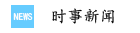
<style>
.page{position:relative;width:140px;height:33px;background:#ffffff}
.page>*{position:absolute;margin:0}
.t1{font:9.8px "KaiTi";color:#fefefe;scale:0.96 1}
.t2{font:16.4px "KaiTi";color:#000000}
</style>
<div class="page">
<p class="t1" style="left:13px;top:13px;width:20px;height:8px">NEWS</p>
<p class="t2" style="left:52px;top:8px;width:63px;height:16px">时事新闻</p>
</div>
